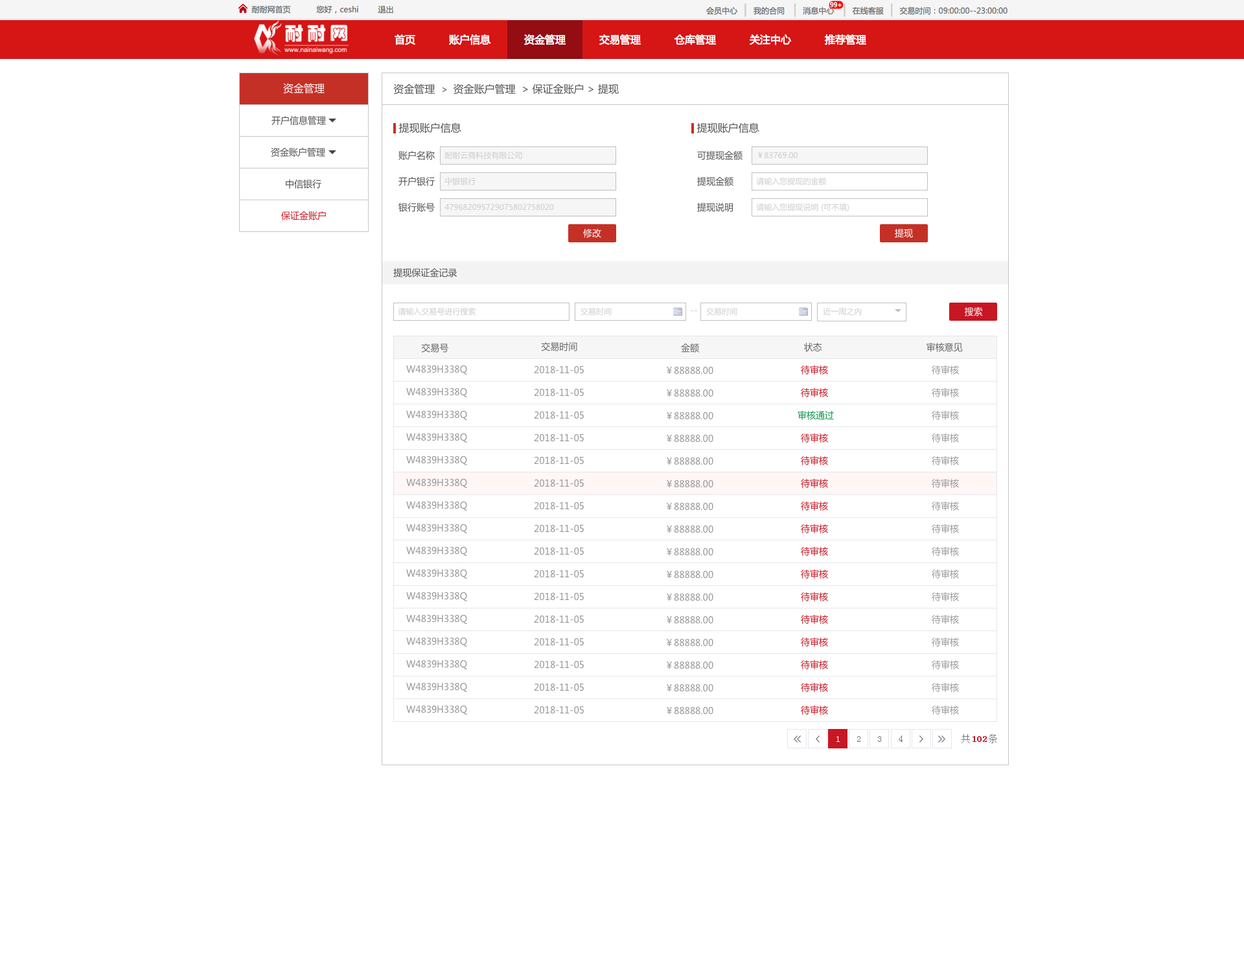
<style>
.page{position:relative;width:1244px;height:959px;background:#ffffff}
.page>*{position:absolute;margin:0}
.t1{font:10.4px "MicrosoftYaHei";color:#ffffff}
.t2{font:10.4px "MicrosoftYaHei";color:#535353}
.t3{font:9.1px "MicrosoftYaHei";color:#535353}
.t4{font:7.8px "MicrosoftYaHei";color:#cccccc}
.t5{font:9.1px "MicrosoftYaHei";color:#c81623}
.t6{font:9.1px "MicrosoftYaHei";color:#ffffff}
.t7{font:9.1px "MicrosoftYaHei";color:#cccccc}
.t8{font:9.1px "MicrosoftYaHei";color:#666666}
.t9{font:9.1px "MicrosoftYaHei";color:#999999}
.t10{font:9.1px "MicrosoftYaHei";color:#0f944d}
.t11{font:9.1px "SimSun";color:#ffffff}
.t12{font:9.1px "SimSun";color:#767676}
.t13{font:9.1px "SimSun";color:#c81623;font-weight:bold}
</style>
<div class="page">
<p class="t1" style="left:283px;top:83px;width:42px;height:11px">资金管理</p>
<p class="t2" style="left:393px;top:84px;width:226px;height:11px">资金管理  <span class="t3">&gt;  </span>资金账户管理  &gt; 保证金账户 &gt; 提现</p>
<p class="t3" style="left:271px;top:116px;width:55px;height:9px">开户信息管理</p>
<p class="t2" style="left:398px;top:122px;width:63px;height:11px">提现账户信息</p>
<p class="t2" style="left:696px;top:122px;width:63px;height:11px">提现账户信息</p>
<p class="t3" style="left:271px;top:148px;width:54px;height:9px">资金账户管理</p>
<p class="t3" style="left:398px;top:151px;width:37px;height:9px">账户名称</p>
<p class="t4" style="left:444px;top:152px;width:78px;height:7px">耐耐云商科技有限公司</p>
<p class="t3" style="left:697px;top:151px;width:45px;height:9px">可提现金额</p>
<p class="t4" style="left:758px;top:152px;width:39px;height:7px">￥83769.00</p>
<p class="t3" style="left:286px;top:179px;width:35px;height:10px">中信银行</p>
<p class="t3" style="left:398px;top:177px;width:37px;height:9px">开户银行</p>
<p class="t4" style="left:445px;top:177px;width:31px;height:8px">中银银行</p>
<p class="t3" style="left:697px;top:177px;width:36px;height:9px">提现金额</p>
<p class="t4" style="left:756px;top:177px;width:71px;height:8px">请输入您提现的金额</p>
<p class="t3" style="left:398px;top:203px;width:37px;height:9px">银行账号</p>
<p class="t4" style="left:444px;top:203px;width:110px;height:8px">479682095729075802758020</p>
<p class="t3" style="left:697px;top:203px;width:36px;height:9px">提现说明</p>
<p class="t4" style="left:756px;top:203px;width:93px;height:9px">请输入您提现说明 (可不填)</p>
<p class="t5" style="left:281px;top:211px;width:45px;height:9px">保证金账户</p>
<p class="t6" style="left:583px;top:229px;width:18px;height:9px">修改</p>
<p class="t6" style="left:895px;top:229px;width:18px;height:9px">提现</p>
<p class="t3" style="left:393px;top:268px;width:64px;height:9px">提现保证金记录</p>
<p class="t4" style="left:398px;top:308px;width:77px;height:7px">请输入交易号进行搜索</p>
<p class="t4" style="left:580px;top:308px;width:32px;height:7px">交易时间</p>
<p class="t7" style="left:691px;top:310px;width:7px;height:2px">--</p>
<p class="t4" style="left:706px;top:308px;width:31px;height:7px">交易时间</p>
<p class="t4" style="left:823px;top:308px;width:39px;height:7px">近一周之内</p>
<p class="t6" style="left:964px;top:307px;width:19px;height:9px">搜索</p>
<p class="t8" style="left:421px;top:343px;width:28px;height:9px">交易号</p>
<p class="t8" style="left:541px;top:342px;width:36px;height:9px">交易时间</p>
<p class="t8" style="left:681px;top:343px;width:18px;height:9px">金额</p>
<p class="t8" style="left:804px;top:343px;width:18px;height:9px">状态</p>
<p class="t8" style="left:926px;top:343px;width:37px;height:9px">审核意见</p>
<p class="t9" style="left:406px;top:365px;width:61px;height:9px">W4839H338Q</p>
<p class="t9" style="left:534px;top:365px;width:50px;height:9px">2018-11-05</p>
<p class="t5" style="left:801px;top:365px;width:27px;height:9px">待审核</p>
<p class="t9" style="left:932px;top:365px;width:27px;height:9px">待审核</p>
<p class="t9" style="left:667px;top:366px;width:46px;height:8px">￥88888.00</p>
<p class="t9" style="left:406px;top:387px;width:61px;height:10px">W4839H338Q</p>
<p class="t9" style="left:534px;top:388px;width:50px;height:8px">2018-11-05</p>
<p class="t9" style="left:667px;top:389px;width:46px;height:8px">￥88888.00</p>
<p class="t5" style="left:801px;top:388px;width:27px;height:9px">待审核</p>
<p class="t9" style="left:932px;top:388px;width:27px;height:9px">待审核</p>
<p class="t9" style="left:406px;top:410px;width:61px;height:10px">W4839H338Q</p>
<p class="t9" style="left:534px;top:411px;width:50px;height:8px">2018-11-05</p>
<p class="t9" style="left:667px;top:411px;width:46px;height:9px">￥88888.00</p>
<p class="t10" style="left:797px;top:411px;width:37px;height:9px">审核通过</p>
<p class="t9" style="left:932px;top:411px;width:27px;height:9px">待审核</p>
<p class="t9" style="left:406px;top:433px;width:61px;height:9px">W4839H338Q</p>
<p class="t9" style="left:534px;top:433px;width:50px;height:9px">2018-11-05</p>
<p class="t9" style="left:667px;top:434px;width:46px;height:8px">￥88888.00</p>
<p class="t5" style="left:801px;top:433px;width:27px;height:9px">待审核</p>
<p class="t9" style="left:932px;top:433px;width:27px;height:9px">待审核</p>
<p class="t9" style="left:406px;top:455px;width:61px;height:10px">W4839H338Q</p>
<p class="t9" style="left:534px;top:456px;width:50px;height:8px">2018-11-05</p>
<p class="t9" style="left:667px;top:457px;width:46px;height:8px">￥88888.00</p>
<p class="t5" style="left:801px;top:456px;width:27px;height:9px">待审核</p>
<p class="t9" style="left:932px;top:456px;width:27px;height:9px">待审核</p>
<p class="t9" style="left:406px;top:478px;width:61px;height:10px">W4839H338Q</p>
<p class="t9" style="left:534px;top:479px;width:50px;height:8px">2018-11-05</p>
<p class="t9" style="left:667px;top:479px;width:46px;height:9px">￥88888.00</p>
<p class="t5" style="left:801px;top:479px;width:27px;height:9px">待审核</p>
<p class="t9" style="left:932px;top:479px;width:27px;height:9px">待审核</p>
<p class="t9" style="left:406px;top:501px;width:61px;height:9px">W4839H338Q</p>
<p class="t9" style="left:534px;top:501px;width:50px;height:9px">2018-11-05</p>
<p class="t9" style="left:667px;top:502px;width:46px;height:8px">￥88888.00</p>
<p class="t5" style="left:801px;top:501px;width:27px;height:9px">待审核</p>
<p class="t9" style="left:932px;top:501px;width:27px;height:9px">待审核</p>
<p class="t9" style="left:406px;top:523px;width:61px;height:10px">W4839H338Q</p>
<p class="t9" style="left:534px;top:524px;width:50px;height:8px">2018-11-05</p>
<p class="t9" style="left:667px;top:525px;width:46px;height:8px">￥88888.00</p>
<p class="t5" style="left:801px;top:524px;width:27px;height:9px">待审核</p>
<p class="t9" style="left:932px;top:524px;width:27px;height:9px">待审核</p>
<p class="t9" style="left:406px;top:546px;width:61px;height:10px">W4839H338Q</p>
<p class="t9" style="left:534px;top:547px;width:50px;height:8px">2018-11-05</p>
<p class="t9" style="left:667px;top:547px;width:46px;height:9px">￥88888.00</p>
<p class="t5" style="left:801px;top:547px;width:27px;height:9px">待审核</p>
<p class="t9" style="left:932px;top:547px;width:27px;height:9px">待审核</p>
<p class="t9" style="left:406px;top:569px;width:61px;height:9px">W4839H338Q</p>
<p class="t9" style="left:534px;top:569px;width:50px;height:9px">2018-11-05</p>
<p class="t5" style="left:801px;top:569px;width:27px;height:9px">待审核</p>
<p class="t9" style="left:932px;top:569px;width:27px;height:9px">待审核</p>
<p class="t9" style="left:667px;top:570px;width:46px;height:8px">￥88888.00</p>
<p class="t9" style="left:406px;top:591px;width:61px;height:10px">W4839H338Q</p>
<p class="t9" style="left:534px;top:592px;width:50px;height:9px">2018-11-05</p>
<p class="t9" style="left:667px;top:593px;width:46px;height:8px">￥88888.00</p>
<p class="t5" style="left:801px;top:592px;width:27px;height:9px">待审核</p>
<p class="t9" style="left:932px;top:592px;width:27px;height:9px">待审核</p>
<p class="t9" style="left:406px;top:614px;width:61px;height:10px">W4839H338Q</p>
<p class="t9" style="left:534px;top:615px;width:50px;height:8px">2018-11-05</p>
<p class="t9" style="left:667px;top:615px;width:46px;height:9px">￥88888.00</p>
<p class="t5" style="left:801px;top:615px;width:27px;height:9px">待审核</p>
<p class="t9" style="left:932px;top:615px;width:27px;height:9px">待审核</p>
<p class="t9" style="left:406px;top:637px;width:61px;height:9px">W4839H338Q</p>
<p class="t9" style="left:534px;top:637px;width:50px;height:9px">2018-11-05</p>
<p class="t9" style="left:667px;top:638px;width:46px;height:8px">￥88888.00</p>
<p class="t5" style="left:801px;top:637px;width:27px;height:9px">待审核</p>
<p class="t9" style="left:932px;top:637px;width:27px;height:9px">待审核</p>
<p class="t9" style="left:406px;top:659px;width:61px;height:10px">W4839H338Q</p>
<p class="t9" style="left:534px;top:660px;width:50px;height:9px">2018-11-05</p>
<p class="t9" style="left:667px;top:661px;width:46px;height:8px">￥88888.00</p>
<p class="t5" style="left:801px;top:660px;width:27px;height:9px">待审核</p>
<p class="t9" style="left:932px;top:660px;width:27px;height:9px">待审核</p>
<p class="t9" style="left:406px;top:682px;width:61px;height:10px">W4839H338Q</p>
<p class="t9" style="left:534px;top:683px;width:50px;height:8px">2018-11-05</p>
<p class="t9" style="left:667px;top:683px;width:46px;height:9px">￥88888.00</p>
<p class="t5" style="left:801px;top:683px;width:27px;height:9px">待审核</p>
<p class="t9" style="left:932px;top:683px;width:27px;height:9px">待审核</p>
<p class="t9" style="left:406px;top:705px;width:61px;height:10px">W4839H338Q</p>
<p class="t9" style="left:534px;top:705px;width:50px;height:9px">2018-11-05</p>
<p class="t9" style="left:667px;top:706px;width:46px;height:9px">￥88888.00</p>
<p class="t5" style="left:801px;top:705px;width:27px;height:10px">待审核</p>
<p class="t9" style="left:932px;top:705px;width:27px;height:10px">待审核</p>
<p class="t11" style="left:836px;top:736px;width:4px;height:6px">1</p>
<p class="t12" style="left:857px;top:736px;width:3px;height:6px">2</p>
<p class="t12" style="left:878px;top:736px;width:3px;height:6px">3</p>
<p class="t12" style="left:898px;top:735px;width:4px;height:7px">4</p>
<p class="t12" style="left:961px;top:734px;width:36px;height:9px">共    条</p>
<p class="t13" style="left:972px;top:736px;width:15px;height:6px">102</p>
</div>
